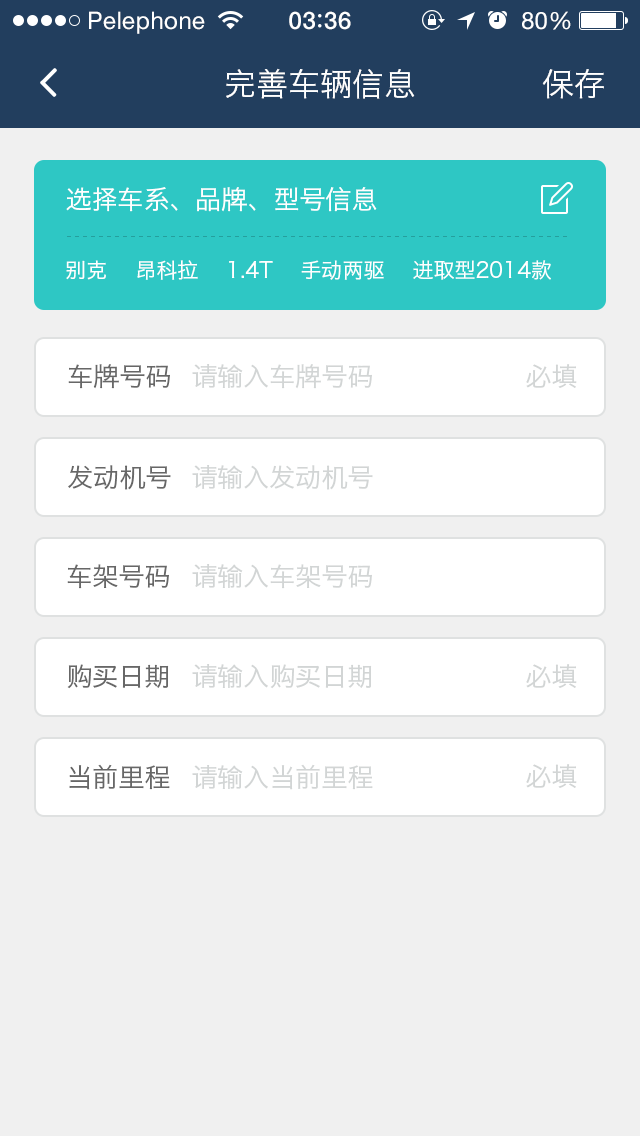
<style>
.page{position:relative;width:640px;height:1136px;background:#f0f0f0}
.page>*{position:absolute;margin:0}
.t1{font:24px "HelveticaNeue";letter-spacing:0.02em;color:#ffffff}
.t2{font:24px "HelveticaNeue-Medium";letter-spacing:0.03em;color:#ffffff}
.t3{font:32px "HiraginoSansGB-W3";color:#ffffff}
.t4{font:26px "HiraginoSansGB-W3";color:#ffffff}
.t5{font:21px "HiraginoSansGB-W3";color:#ffffff}
.t6{font:26px "HiraginoSansGB-W3";color:#676767}
.t7{font:26px "HiraginoSansGB-W3";color:#d2d5d5}
</style>
<div class="page">
<p class="t1" style="left:89px;top:11px;width:116px;height:23px">Pelephone</p>
<p class="t2" style="left:289px;top:11px;width:62px;height:19px">03 36</p>
<p class="t1" style="left:522px;top:11px;width:49px;height:19px">80%</p>
<p class="t3" style="left:226px;top:68px;width:189px;height:31px">完善车辆信息</p>
<p class="t3" style="left:542px;top:69px;width:62px;height:30px">保存</p>
<p class="t4" style="left:66px;top:187px;width:311px;height:25px">选择车系、品牌、型号信息</p>
<p class="t5" style="left:66px;top:260px;width:485px;height:20px">别克    昂科拉    1.4T    手动两驱    进取型2014款</p>
<p class="t6" style="left:68px;top:364px;width:102px;height:25px">车牌号码</p>
<p class="t7" style="left:192px;top:364px;width:180px;height:25px">请输入车牌号码</p>
<p class="t7" style="left:526px;top:364px;width:51px;height:24px">必填</p>
<p class="t6" style="left:68px;top:465px;width:103px;height:25px">发动机号</p>
<p class="t7" style="left:192px;top:465px;width:181px;height:25px">请输入发动机号</p>
<p class="t6" style="left:67px;top:564px;width:102px;height:25px">车架号码</p>
<p class="t7" style="left:192px;top:564px;width:180px;height:25px">请输入车架号码</p>
<p class="t6" style="left:67px;top:664px;width:102px;height:25px">购买日期</p>
<p class="t7" style="left:192px;top:664px;width:180px;height:25px">请输入购买日期</p>
<p class="t7" style="left:526px;top:664px;width:51px;height:24px">必填</p>
<p class="t6" style="left:69px;top:764px;width:101px;height:26px">当前里程</p>
<p class="t7" style="left:192px;top:764px;width:181px;height:26px">请输入当前里程</p>
<p class="t7" style="left:526px;top:764px;width:51px;height:24px">必填</p>
</div>
